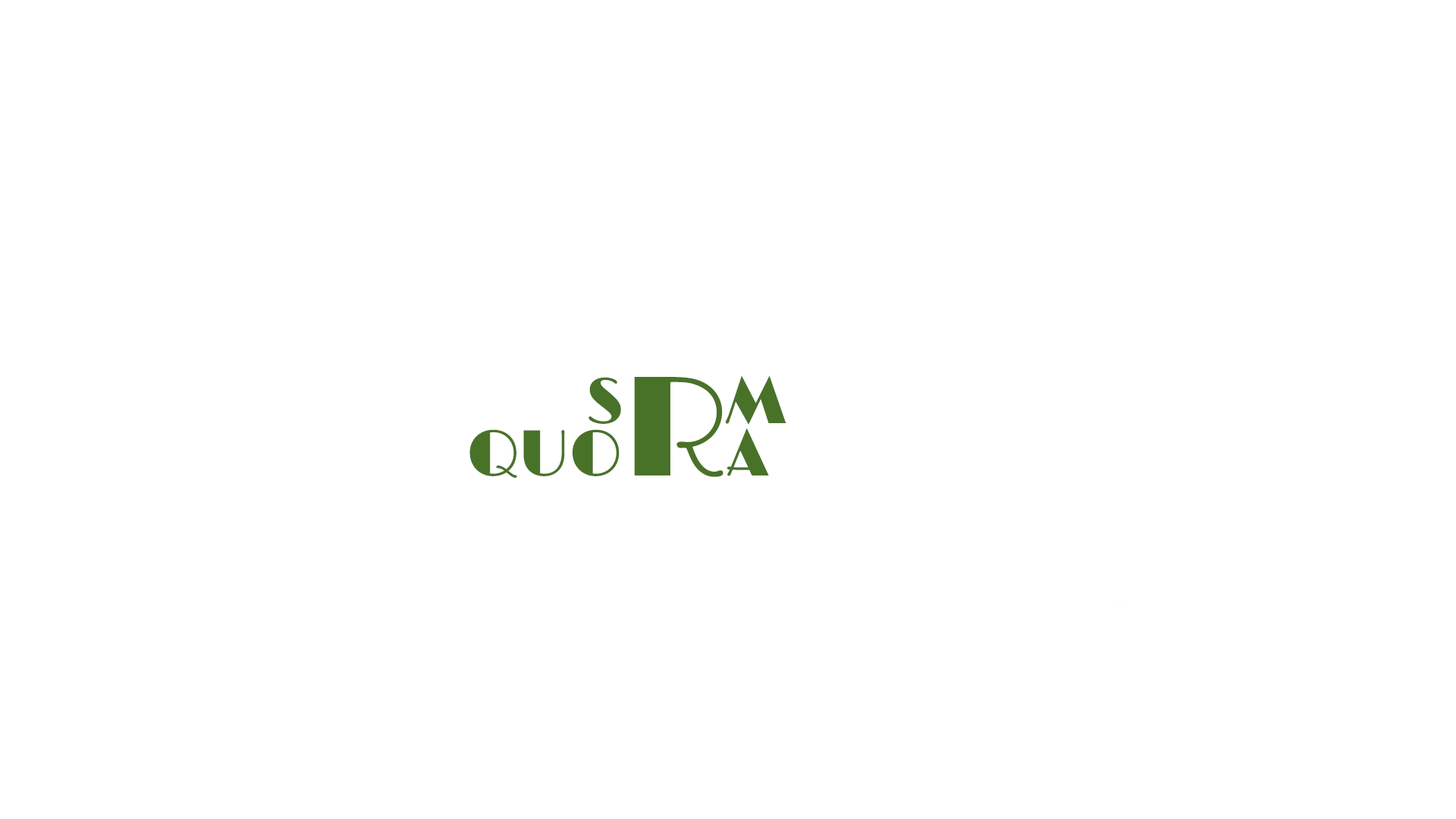
<style>
.page{position:relative;width:1456px;height:819px;background:#ffffff}
.page>*{position:absolute;margin:0}
.t1{font:65.2px "Limelight";color:#497229}
.t2{font:142.6px "Limelight";color:#497229}
</style>
<div class="page">
<p class="t1" style="left:469px;top:377px;width:300px;height:101px">QUO<span class="t2">R</span>A</p>
<p class="t1" style="left:588px;top:375px;width:198px;height:50px">S       M</p>
</div>
